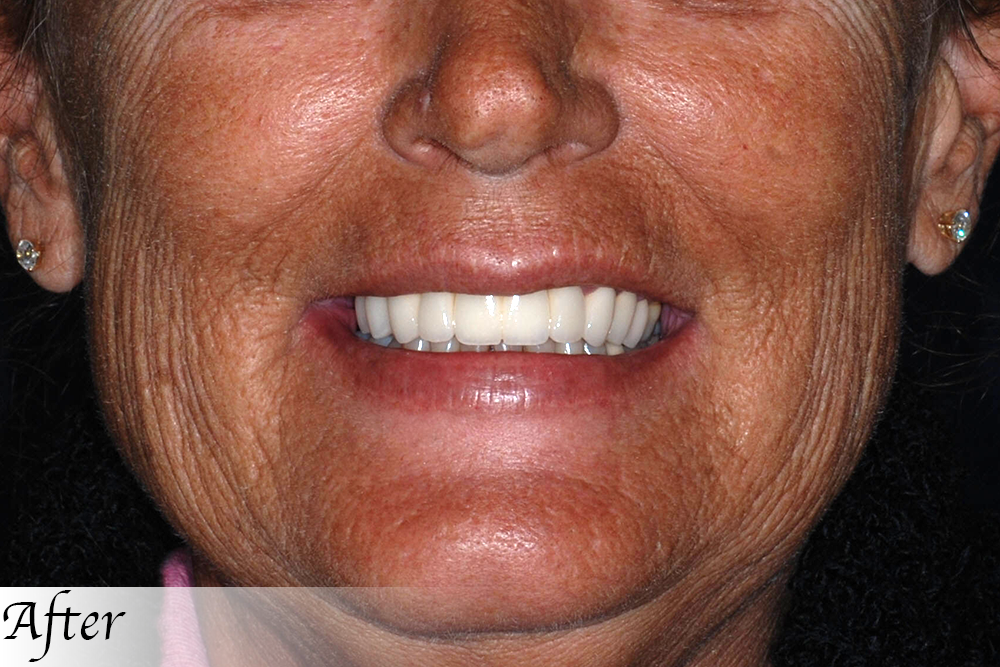
<style>
.page{position:relative;width:1000px;height:667px}
.page>*{position:absolute;margin:0}
.t1{font:97px "Apple-Chancery";color:#000000}
</style>
<div class="page">
<p class="t1" style="left:3px;top:590px;width:124px;height:72px">After</p>
</div>
